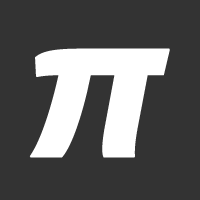
<style>
.page{position:relative;width:200px;height:200px;background:#333333}
.page>*{position:absolute;margin:0}
.t1{font:190.3px "KozGoPro-Heavy";color:#ffffff;font-weight:bold}
</style>
<div class="page">
<p class="t1" style="left:29px;top:48px;width:141px;height:110px">π</p>
</div>
